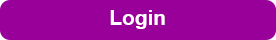
<style>
.page{position:relative;width:276px;height:40px;background:#990099}
.page>*{position:absolute;margin:0}
.t1{font:20.8px "Arial-BoldMT";color:#ffffff}
</style>
<div class="page">
<p class="t1" style="left:110px;top:10px;width:55px;height:19px">Login</p>
</div>
